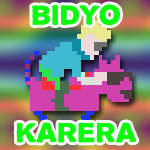
<style>
.page{position:relative;width:150px;height:150px}
.page>*{position:absolute;margin:0}
.t1{font:24.5px "Propaganda";color:#0cfb0c;scale:1.06 1}
</style>
<div class="page">
<p class="t1" style="left:16px;top:4px;width:121px;height:139px;text-align:center">BIDYO<br><br><br><br>KARERA</p>
</div>
